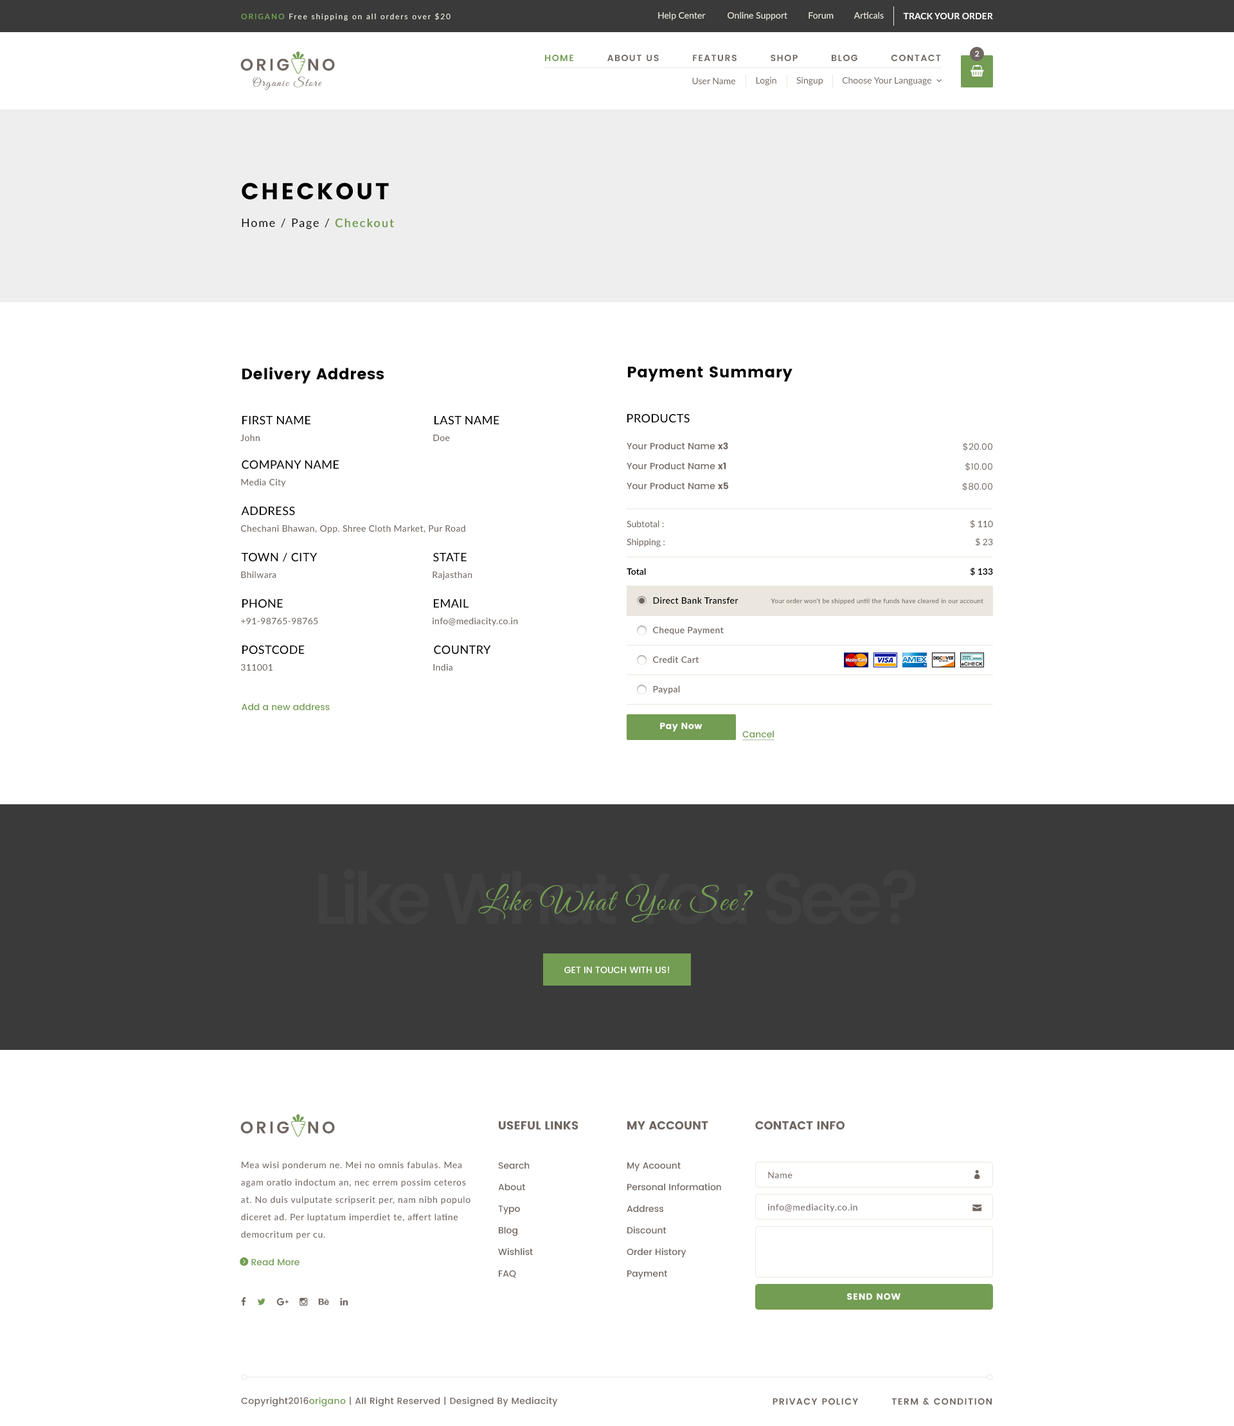
<style>
.page{position:relative;width:1234px;height:1426px;background:#ffffff}
.page>*{position:absolute;margin:0}
.t1{font:7.7px "Lato-Medium";letter-spacing:0.15em;color:#ebe7de}
.t2{font:7.7px "Lato-Bold";letter-spacing:0.15em;color:#739d52}
.t3{font:9px "Lato-Medium";color:#ebe7de}
.t4{font:9px "Lato-Bold";color:#ffffff;text-transform:uppercase}
.t5{font:7.7px "Poppins-Medium";color:#ffffff}
.t6{font:16.7px "Poppins-SemiBold";letter-spacing:0.15em;color:#6f6661}
.t7{font:9px "Poppins-SemiBold";letter-spacing:0.1em;color:#6f6661;text-transform:uppercase}
.t8{font:9px "Poppins-SemiBold";letter-spacing:0.1em;color:#739d52;text-transform:uppercase}
.t9{font:11.6px "GreatVibes-Regular";letter-spacing:0.102em;color:#6f6661}
.t10{font:9px "Lato-Regular";color:#6f6661}
.t11{font:23.1px "Poppins";letter-spacing:0.1em;color:#000000;text-transform:uppercase}
.t12{font:11.6px "Lato-Regular";letter-spacing:0.1em;color:#000000}
.t13{font:11.6px "Lato-Regular";letter-spacing:0.1em;color:#739d52;font-weight:bold}
.t14{font:15.4px "Poppins";letter-spacing:0.025em;color:#000000}
.t15{font:11.6px "Lato-Medium";letter-spacing:0.025em;color:#000000;text-transform:uppercase}
.t16{font:9px "Lato-Medium";letter-spacing:0.025em;color:#6f6661}
.t17{font:9px "Poppins-Medium";color:#6f6661}
.t18{font:9px "Poppins";color:#6f6661}
.t19{font:9px "Poppins-Regular";color:#6f6661}
.t20{font:9px "Lato-Medium";color:#6f6661}
.t21{font:9px "Lato-Bold";color:#000000}
.t22{font:9px "Lato-Semibold";letter-spacing:0.025em;color:#000000}
.t23{font:6.4px "Lato-Medium";letter-spacing:0.025em;color:#6f6661}
.t24{font:9px "Lato-Semibold";letter-spacing:0.025em;color:#6f6661}
.t25{font:9px "Poppins-Medium";color:#739d52}
.t26{font:9px "Poppins";letter-spacing:0.025em;color:#ffffff}
.t27{font:9px "Poppins-Medium";color:#739d52;text-decoration:underline}
.t28{font:70.7px "Poppins-Medium";letter-spacing:-0.1em;color:#414141;font-weight:bold}
.t29{font:30.9px "GreatVibes-Regular";letter-spacing:0.05em;color:#739d52}
.t30{font:9px "Poppins-Medium";color:#ffffff;text-transform:uppercase}
.t31{font:11.6px "Poppins";color:#6f6661;text-transform:uppercase}
.t32{font:9px/17.4px "Lato-Medium";letter-spacing:0.05em;color:#6f6661}
.t33{font:9px "Lato-Medium";letter-spacing:0.05em;color:#6f6661}
.t34{font:9px "Poppins";letter-spacing:0.05em;color:#ffffff;text-transform:uppercase}
.t35{font:9px "Poppins-Medium";letter-spacing:0.025em;color:#6f6661}
.t36{font:9px "Poppins-Medium";letter-spacing:0.025em;color:#739d52}
</style>
<div class="page">
<p class="t1" style="left:241px;top:13px;width:210px;height:8px"><span class="t2">ORIGANO </span>Free shipping on all orders over $20</p>
<p class="t3" style="left:658px;top:12px;width:48px;height:9px">Help Center</p>
<p class="t3" style="left:728px;top:12px;width:60px;height:9px">Online Support</p>
<p class="t3" style="left:809px;top:12px;width:25px;height:7px">Forum</p>
<p class="t3" style="left:854px;top:12px;width:30px;height:7px">Articals</p>
<p class="t4" style="left:903px;top:13px;width:90px;height:6px">Track Your Order</p>
<p class="t5" style="left:975px;top:51px;width:5px;height:6px">2</p>
<p class="t6" style="left:240px;top:59px;width:95px;height:12px">ORIG  NO</p>
<p class="t7" style="left:545px;top:55px;width:396px;height:6px"><span class="t8">Home         </span>About Us         Featurs         Shop         Blog         Contact</p>
<p class="t9" style="left:253px;top:76px;width:69px;height:14px">Organic Store</p>
<p class="t10" style="left:692px;top:78px;width:43px;height:6px">User Name</p>
<p class="t10" style="left:756px;top:76px;width:21px;height:10px">Login</p>
<p class="t10" style="left:797px;top:76px;width:26px;height:10px">Singup</p>
<p class="t11" style="left:242px;top:183px;width:147px;height:17px">Checkout</p>
<p class="t12" style="left:242px;top:218px;width:152px;height:12px">Home / Page / <span class="t13">Checkout</span></p>
<p class="t14" style="left:242px;top:367px;width:142px;height:17px">Delivery Address</p>
<p class="t14" style="left:628px;top:366px;width:165px;height:16px">Payment Summary</p>
<p class="t15" style="left:242px;top:416px;width:68px;height:9px">First Name</p>
<p class="t15" style="left:435px;top:416px;width:65px;height:9px">Last Name</p>
<p class="t15" style="left:627px;top:414px;width:63px;height:9px">Products</p>
<p class="t16" style="left:240px;top:434px;width:20px;height:7px">John</p>
<p class="t16" style="left:433px;top:435px;width:17px;height:6px">Doe</p>
<p class="t17" style="left:627px;top:442px;width:101px;height:7px">Your Product Name <span class="t18">x3</span></p>
<p class="t19" style="left:963px;top:442px;width:30px;height:9px">$20.00</p>
<p class="t15" style="left:242px;top:460px;width:97px;height:9px">Company Name</p>
<p class="t17" style="left:627px;top:462px;width:99px;height:7px">Your Product Name <span class="t18">x1</span></p>
<p class="t19" style="left:966px;top:462px;width:27px;height:9px">$10.00</p>
<p class="t16" style="left:241px;top:478px;width:45px;height:9px">Media City</p>
<p class="t17" style="left:627px;top:482px;width:102px;height:7px">Your Product Name <span class="t18">x5</span></p>
<p class="t19" style="left:962px;top:482px;width:31px;height:9px">$80.00</p>
<p class="t15" style="left:241px;top:507px;width:54px;height:9px">Address</p>
<p class="t20" style="left:627px;top:520px;width:37px;height:7px">Subtotal :</p>
<p class="t20" style="left:970px;top:519px;width:23px;height:9px">$ 110</p>
<p class="t16" style="left:241px;top:525px;width:224px;height:9px">Chechani Bhawan, Opp. Shree Cloth Market, Pur Road</p>
<p class="t20" style="left:627px;top:538px;width:38px;height:9px">Shipping :</p>
<p class="t20" style="left:976px;top:537px;width:17px;height:9px">$ 23</p>
<p class="t15" style="left:241px;top:552px;width:77px;height:10px">Town / City</p>
<p class="t15" style="left:433px;top:553px;width:34px;height:9px">State</p>
<p class="t21" style="left:627px;top:568px;width:19px;height:7px">Total</p>
<p class="t21" style="left:970px;top:567px;width:23px;height:9px">$ 133</p>
<p class="t16" style="left:241px;top:571px;width:35px;height:7px">Bhilwara</p>
<p class="t16" style="left:433px;top:571px;width:40px;height:9px">Rajasthan</p>
<p class="t15" style="left:242px;top:599px;width:41px;height:9px">Phone</p>
<p class="t15" style="left:434px;top:599px;width:35px;height:9px">Email</p>
<p class="t22" style="left:653px;top:597px;width:86px;height:7px">Direct Bank Transfer</p>
<p class="t23" style="left:771px;top:598px;width:213px;height:6px">Your order won’t be shipped until the funds have cleared in our account</p>
<p class="t16" style="left:241px;top:618px;width:77px;height:6px">+91-98765-98765</p>
<p class="t16" style="left:433px;top:617px;width:85px;height:9px">info@mediacity.co.in</p>
<p class="t24" style="left:653px;top:626px;width:71px;height:9px">Cheque Payment</p>
<p class="t15" style="left:242px;top:645px;width:63px;height:9px">PostCode</p>
<p class="t15" style="left:434px;top:645px;width:57px;height:9px">Country</p>
<p class="t16" style="left:240px;top:664px;width:33px;height:6px">311001</p>
<p class="t16" style="left:433px;top:663px;width:20px;height:7px">India</p>
<p class="t24" style="left:653px;top:656px;width:46px;height:7px">Credit Cart</p>
<p class="t24" style="left:653px;top:685px;width:27px;height:9px">Paypal</p>
<p class="t25" style="left:242px;top:703px;width:88px;height:7px">Add a new address</p>
<p class="t26" style="left:660px;top:723px;width:43px;height:9px">Pay Now</p>
<p class="t27" style="left:742px;top:730px;width:33px;height:11px">Cancel</p>
<p class="t28" style="left:318px;top:869px;width:598px;height:55px">Like What You See?</p>
<p class="t29" style="left:478px;top:883px;width:275px;height:40px">Like What You See?</p>
<p class="t30" style="left:564px;top:966px;width:106px;height:7px">Get In Touch With Us!</p>
<p class="t6" style="left:240px;top:1121px;width:95px;height:12px">ORIG  NO</p>
<p class="t31" style="left:499px;top:1121px;width:80px;height:9px">Useful Links</p>
<p class="t31" style="left:627px;top:1121px;width:81px;height:9px">My Account</p>
<p class="t31" style="left:755px;top:1121px;width:90px;height:9px">Contact Info</p>
<p class="t32" style="left:241px;top:1161px;width:230px;height:78px">Mea wisi ponderum ne. Mei no omnis fabulas. Mea agam oratio indoctum an, nec errem possim ceteros at. No duis vulputate scripserit per, nam nibh populo diceret ad. Per luptatum imperdiet te, affert latine democritum per cu.</p>
<p class="t17" style="left:498px;top:1162px;width:35px;height:116px">Search<br><br>About<br><br>Typo<br><br>Blog<br><br>Wishlist<br><br>FAQ</p>
<p class="t17" style="left:627px;top:1162px;width:94px;height:117px">My Acoount<br><br>Personal Information<br><br>Address<br><br>Discount<br><br>Order History<br><br>Payment</p>
<p class="t33" style="left:768px;top:1171px;width:25px;height:7px">Name</p>
<p class="t33" style="left:768px;top:1203px;width:90px;height:9px">info@mediacity.co.in</p>
<p class="t34" style="left:847px;top:1293px;width:54px;height:7px">Send Now</p>
<p class="t35" style="left:241px;top:1396px;width:317px;height:11px">Copyright2016<span class="t36">origano </span>| All Right Reserved | Designed By Mediacity</p>
<p class="t7" style="left:773px;top:1398px;width:219px;height:7px">Privacy Policy         Term &amp; Condition</p>
</div>
